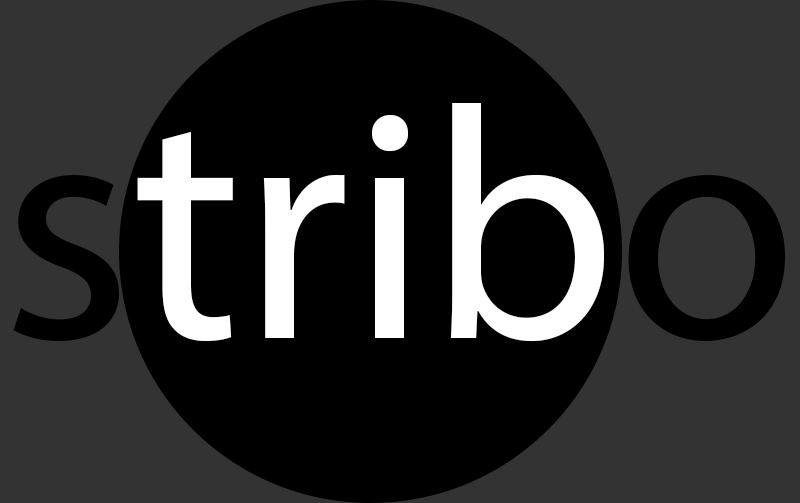
<style>
.page{position:relative;width:800px;height:503px;background:#333333}
.page>*{position:absolute;margin:0}
.t1{font:330.9px "MyriadPro-Regular";color:#ffffff}
.t2{font:330.9px "MyriadPro-Regular";color:#000000}
</style>
<div class="page">
<p class="t1" style="left:13px;top:103px;width:772px;height:239px"><span class="t2">s</span>trib<span class="t2">o</span></p>
</div>
